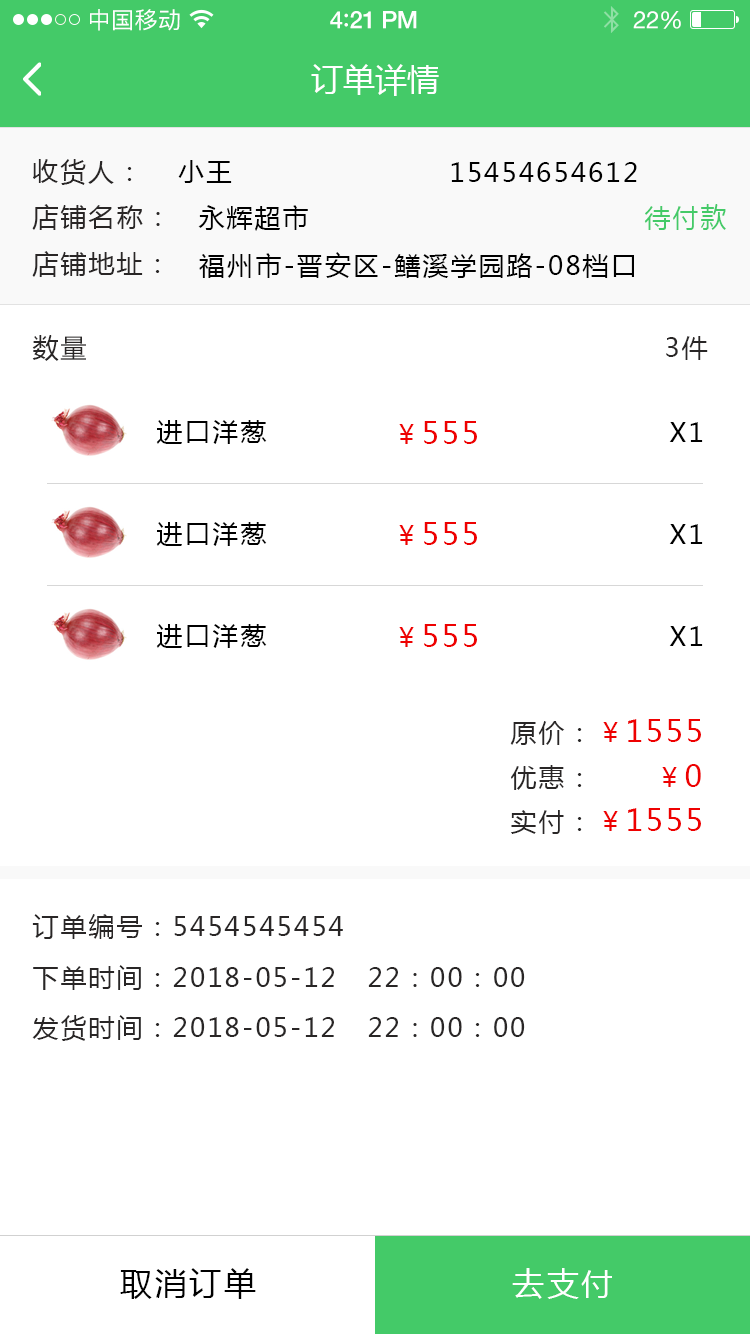
<style>
.page{position:relative;width:750px;height:1334px;background:#ffffff}
.page>*{position:absolute;margin:0}
.t1{font:23px "PingFangSC-Regular";letter-spacing:0.02em;color:#ffffff}
.t2{font:24px "HelveticaNeue-Medium";letter-spacing:-0.02em;color:#ffffff}
.t3{font:26px "Avenir-Medium";letter-spacing:-0.02em;color:#ffffff}
.t4{font:24px "HelveticaNeue";letter-spacing:-0.02em;color:#ffffff}
.t5{font:32px "MicrosoftYaHei";color:#ffffff;text-transform:uppercase}
.t6{font:26px "MicrosoftYaHei";letter-spacing:0.08em;color:#292626;text-transform:uppercase}
.t7{font:26px "MicrosoftYaHei";letter-spacing:0.08em;color:#000000;text-transform:uppercase}
.t8{font:26px "MicrosoftYaHei";letter-spacing:0.08em;color:#44ca68;text-transform:uppercase}
.t9{font:30px "MicrosoftYaHei";letter-spacing:0.08em;color:#ee0202;text-transform:uppercase}
.t10{font:26px "MicrosoftYaHei";letter-spacing:0.08em;color:#ee0202;text-transform:uppercase}
.t11{font:30px "MicrosoftYaHei";letter-spacing:0.08em;color:#ee0101;text-transform:uppercase}
.t12{font:26px "MicrosoftYaHei";letter-spacing:0.08em;color:#ee0101;text-transform:uppercase}
.t13{font:32px "MicrosoftYaHei";letter-spacing:0.08em;color:#000000;text-transform:uppercase}
.t14{font:32px "MicrosoftYaHei";letter-spacing:0.08em;color:#ffffff;text-transform:uppercase}
</style>
<div class="page">
<p class="t1" style="left:90px;top:9px;width:90px;height:22px">中国移动</p>
<p class="t2" style="left:330px;top:11px;width:87px;height:18px">4<span class="t3">:</span>21 PM</p>
<p class="t4" style="left:633px;top:11px;width:48px;height:18px">22%</p>
<p class="t5" style="left:311px;top:64px;width:128px;height:32px">订单详情</p>
<p class="t6" style="left:33px;top:159px;width:99px;height:26px">收货人：</p>
<p class="t7" style="left:178px;top:160px;width:54px;height:23px">小王</p>
<p class="t7" style="left:451px;top:162px;width:186px;height:20px">15454654612</p>
<p class="t6" style="left:32px;top:204px;width:128px;height:26px">店铺名称：</p>
<p class="t7" style="left:198px;top:205px;width:110px;height:26px">永辉超市</p>
<p class="t8" style="left:644px;top:204px;width:82px;height:26px">待付款</p>
<p class="t6" style="left:32px;top:251px;width:128px;height:26px">店铺地址：</p>
<p class="t7" style="left:199px;top:252px;width:435px;height:26px">福州市-晋安区-鳝溪学园路-08档口</p>
<p class="t6" style="left:32px;top:335px;width:54px;height:26px">数量</p>
<p class="t6" style="left:666px;top:336px;width:42px;height:24px">3件</p>
<p class="t7" style="left:156px;top:420px;width:111px;height:24px">进口洋葱</p>
<p class="t9" style="left:399px;top:421px;width:78px;height:23px"><span class="t10">￥</span>555</p>
<p class="t7" style="left:669px;top:422px;width:34px;height:20px">x1</p>
<p class="t7" style="left:156px;top:522px;width:111px;height:24px">进口洋葱</p>
<p class="t9" style="left:399px;top:522px;width:78px;height:23px"><span class="t10">￥</span>555</p>
<p class="t7" style="left:669px;top:524px;width:34px;height:20px">x1</p>
<p class="t7" style="left:156px;top:624px;width:111px;height:24px">进口洋葱</p>
<p class="t9" style="left:399px;top:624px;width:78px;height:23px"><span class="t10">￥</span>555</p>
<p class="t7" style="left:669px;top:626px;width:34px;height:20px">x1</p>
<p class="t6" style="left:510px;top:721px;width:72px;height:24px">原价：</p>
<p class="t11" style="left:603px;top:719px;width:98px;height:23px"><span class="t12">￥</span>1555</p>
<p class="t6" style="left:511px;top:765px;width:71px;height:25px">优惠：</p>
<p class="t12" style="left:662px;top:764px;width:39px;height:23px">￥<span class="t11">0</span></p>
<p class="t11" style="left:603px;top:808px;width:98px;height:23px"><span class="t12">￥</span>1555</p>
<p class="t6" style="left:511px;top:810px;width:71px;height:24px">实付：</p>
<p class="t6" style="left:32px;top:914px;width:311px;height:25px">订单编号：5454545454</p>
<p class="t6" style="left:33px;top:965px;width:492px;height:25px">下单时间：2018-05-12   22：00：00</p>
<p class="t6" style="left:32px;top:1015px;width:493px;height:26px">发货时间：2018-05-12   22：00：00</p>
<p class="t13" style="left:120px;top:1268px;width:136px;height:31px">取消订单</p>
<p class="t14" style="left:512px;top:1268px;width:100px;height:31px">去支付</p>
</div>
